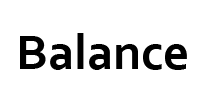
<style>
.page{position:relative;width:197px;height:100px;background:#ffffff}
.page>*{position:absolute;margin:0}
.t1{font:50.8px "Corbel-Bold";color:#000000}
</style>
<div class="page">
<p class="t1" style="left:20px;top:33px;width:167px;height:37px">Balance</p>
</div>
